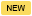
<style>
.page{position:relative;width:32px;height:16px;background:#fadb5f}
.page>*{position:absolute;margin:0}
.t1{font:8px "ArialMT";color:#000000}
</style>
<div class="page">
<p class="t1" style="left:7px;top:5px;width:18px;height:6px">NEW</p>
</div>
